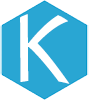
<style>
.page{position:relative;width:89px;height:100px;background:#29a6d3}
.page>*{position:absolute;margin:0}
.t1{font:86.6px "Avenir-Roman";color:#ffffff}
</style>
<div class="page">
<p class="t1" style="left:20px;top:14px;width:50px;height:70px">K</p>
</div>
